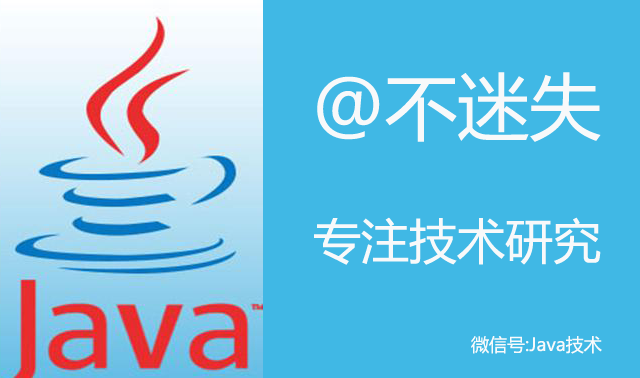
<style>
.page{position:relative;width:640px;height:378px;background:#40b8e5}
.page>*{position:absolute;margin:0}
.t1{font:72px "MicrosoftYaHei";color:#f8f9fa}
.t2{font:48px "MicrosoftYaHei";color:#f8f9fa}
.t3{font:18px "MicrosoftYaHei";color:#f9fafb}
</style>
<div class="page">
<p class="t1" style="left:317px;top:72px;width:284px;height:70px">@不迷失</p>
<p class="t2" style="left:314px;top:217px;width:287px;height:48px">专注技术研究</p>
<p class="t3" style="left:471px;top:336px;width:131px;height:18px">微信号:Java技术</p>
</div>
